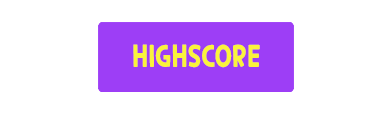
<style>
.page{position:relative;width:391px;height:113px;background:#ffffff}
.page>*{position:absolute;margin:0}
.t1{font:30px "CookieRun-Bold";color:#faf33c;scale:0.8 1}
</style>
<div class="page">
<p class="t1" style="left:133px;top:44px;width:127px;height:24px">HIGHSCORE</p>
</div>
